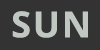
<style>
.page{position:relative;width:100px;height:50px;background:#333333}
.page>*{position:absolute;margin:0}
.t1{font:36px "NotoSans-Bold";letter-spacing:0.05em;color:#c1c8c1}
</style>
<div class="page">
<p class="t1" style="left:12px;top:11px;width:76px;height:27px">SUN</p>
</div>
